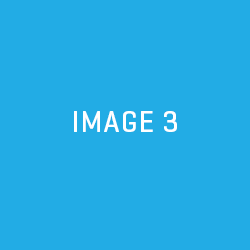
<style>
.page{position:relative;width:250px;height:250px;background:#22ace5}
.page>*{position:absolute;margin:0}
.t1{font:30px "Geogrotesque-Medium";letter-spacing:0.03em;color:#ffffff;text-transform:uppercase}
</style>
<div class="page">
<p class="t1" style="left:74px;top:111px;width:103px;height:21px">IMAGE 3</p>
</div>
